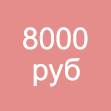
<style>
.page{position:relative;width:111px;height:111px;background:#e48d8b}
.page>*{position:absolute;margin:0}
.t1{font:30px "ArialMT";color:#ffffff}
</style>
<div class="page">
<p class="t1" style="left:23px;top:27px;width:65px;height:23px">8000</p>
<p class="t1" style="left:33px;top:58px;width:47px;height:29px">руб</p>
</div>
